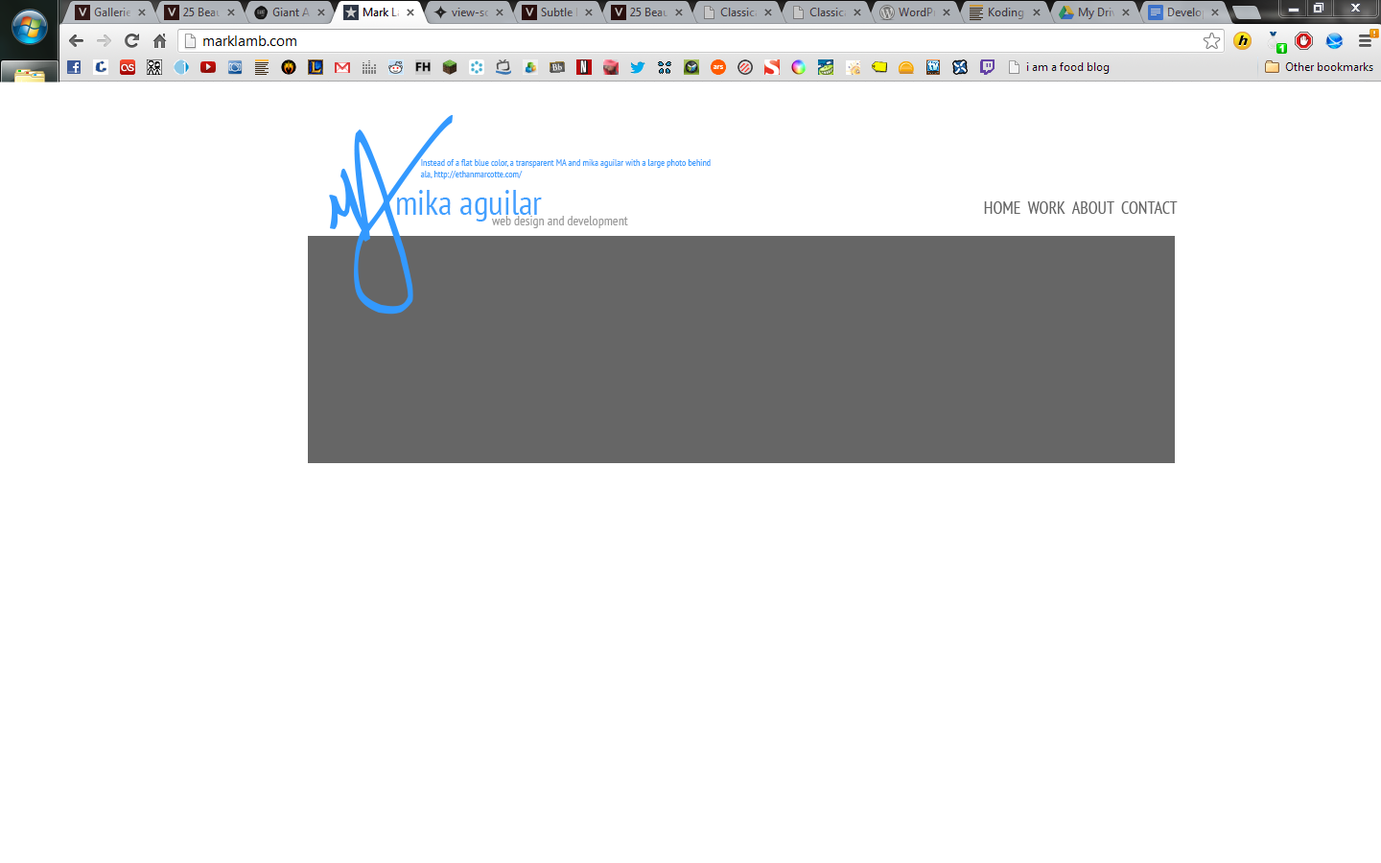
<style>
.page{position:relative;width:1381px;height:863px;background:#ffffff}
.page>*{position:absolute;margin:0}
.t1{font:9.6px "PTSans-Narrow";color:#41a0ff}
.t2{font:34.5px "PTSans-Narrow";color:#41a0ff}
.t3{font:17.3px "PTSans-Narrow";color:#666666}
.t4{font:13.4px "PTSans-Narrow";color:#999999}
</style>
<div class="page">
<p class="t1" style="left:420px;top:159px;width:291px;height:20px">Instead of a flat blue color, a transparent MA and mika aguilar with a large photo behind<br>ala, http://ethanmarcotte.com/</p>
<p class="t2" style="left:397px;top:190px;width:145px;height:32px">mika aguilar</p>
<p class="t3" style="left:984px;top:201px;width:194px;height:13px">HOME  WORK  ABOUT  CONTACT</p>
<p class="t4" style="left:491px;top:216px;width:137px;height:12px">web design and development</p>
</div>
